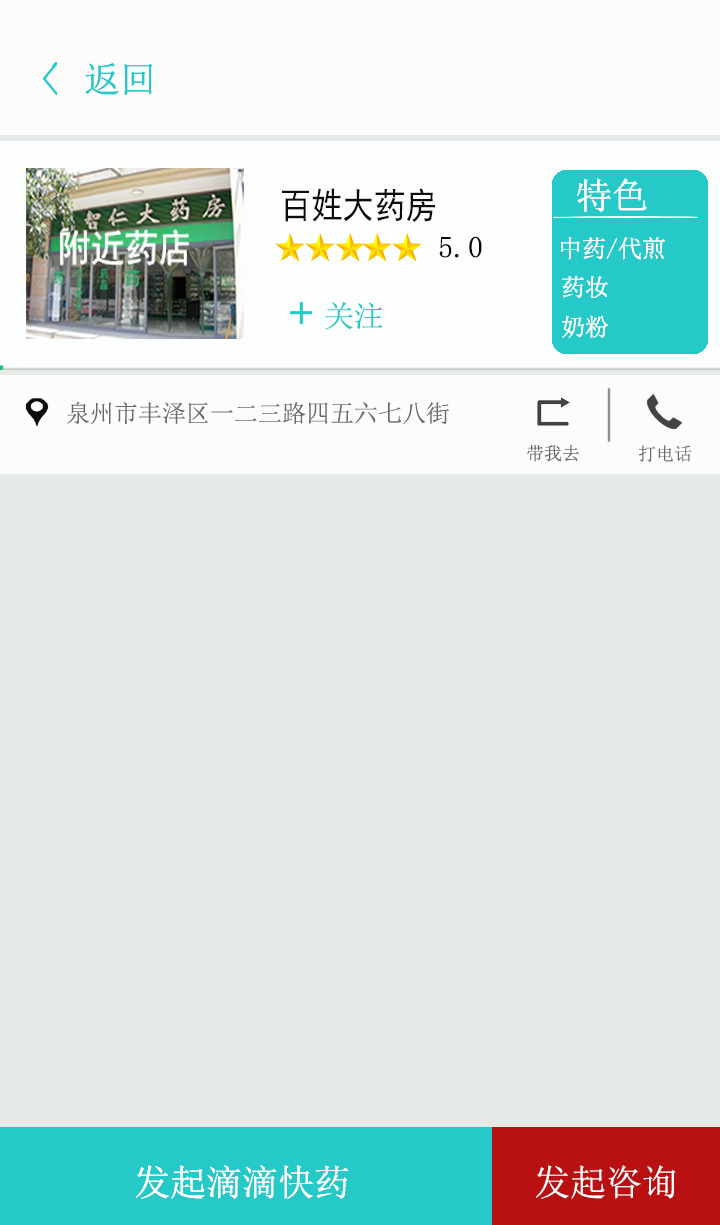
<style>
.page{position:relative;width:720px;height:1225px;background:#e5eae6}
.page>*{position:absolute;margin:0}
.t1{font:36px "SimSun";color:#25c9c8}
.t2{font:36px "SimSun";color:#fcfbfa}
.t3{font:36px "SimHei";color:#0c0c0c;scale:0.87 1}
.t4{font:30px "SimSun";color:#060606}
.t5{font:24px "SimSun";color:#fcfbfa}
.t6{font:30px "SimSun";color:#25c9c8}
.t7{font:24px "SimSun";color:#696969}
.t8{font:18px "SimSun";color:#656565}
.t9{font:18px "SimSun";color:#686868}
.t10{font:36px "SimSun";color:#fefcfc}
</style>
<div class="page">
<p class="t1" style="left:85px;top:63px;width:68px;height:32px">返回</p>
<p class="t1" style="left:85px;top:63px;width:68px;height:32px">返回</p>
<p class="t2" style="left:577px;top:178px;width:70px;height:35px">特色</p>
<p class="t2" style="left:577px;top:178px;width:70px;height:35px">特色</p>
<p class="t3" style="left:282px;top:188px;width:153px;height:34px">百姓大药房</p>
<p class="t4" style="left:439px;top:236px;width:43px;height:22px">5.0</p>
<p class="t5" style="left:561px;top:237px;width:104px;height:23px">中药/代煎</p>
<p class="t5" style="left:561px;top:237px;width:104px;height:23px">中药/代煎</p>
<p class="t5" style="left:562px;top:276px;width:46px;height:22px">药妆</p>
<p class="t5" style="left:562px;top:276px;width:46px;height:22px">药妆</p>
<p class="t6" style="left:325px;top:301px;width:58px;height:29px">关注</p>
<p class="t5" style="left:562px;top:315px;width:46px;height:23px">奶粉</p>
<p class="t5" style="left:562px;top:315px;width:46px;height:23px">奶粉</p>
<p class="t7" style="left:67px;top:401px;width:383px;height:24px">泉州市丰泽区一二三路四五六七八街</p>
<p class="t8" style="left:527px;top:444px;width:52px;height:18px">带我去</p>
<p class="t9" style="left:638px;top:445px;width:54px;height:17px">打电话</p>
<p class="t10" style="left:135px;top:1165px;width:214px;height:34px">发起滴滴快药</p>
<p class="t10" style="left:135px;top:1165px;width:214px;height:34px">发起滴滴快药</p>
<p class="t10" style="left:535px;top:1165px;width:141px;height:34px">发起咨询</p>
</div>
